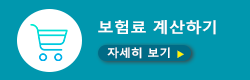
<style>
.page{position:relative;width:250px;height:80px;background:#0097ae}
.page>*{position:absolute;margin:0}
.t1{font:15px "MalgunGothicBold";letter-spacing:-0.005em;color:#ffffff;scale:1.1 1}
.t2{font:11px "MalgunGothicBold";letter-spacing:-0.005em;color:#ffffff;scale:1.1 1}
.t3{font:9px "MalgunGothicBold";letter-spacing:-0.005em;color:#fff600;scale:1.1 1}
</style>
<div class="page">
<p class="t1" style="left:98px;top:20px;width:118px;height:15px">보험료 계산하기</p>
<p class="t2" style="left:107px;top:47px;width:77px;height:12px">자세히 보기 <span class="t3">▶</span></p>
</div>
